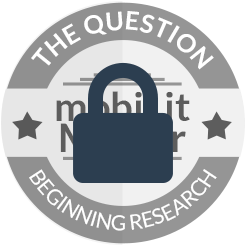
<style>
.page{position:relative;width:246px;height:246px;background:#ffffff}
.page>*{position:absolute;margin:0}
.t1{font:25.1px/82.8px "Lato-Bold";color:#ffffff;text-transform:uppercase}
.t2{font:39.4px/30.8px "Lato-Bold"}
.t3{font:20.9px "Lato-Regular";color:#ffffff;text-transform:uppercase}
</style>
<div class="page">
<p class="t1" style="left:31px;top:11px;width:183px;height:59px;text-align:center">THE QUESTION</p>
<p class="t2" style="left:56px;top:91px;width:134px;height:61px;text-align:center">mobiLit<br>Master</p>
<p class="t3" style="left:29px;top:169px;width:188px;height:62px;text-align:center">BEGINNING RESEARCH</p>
</div>
